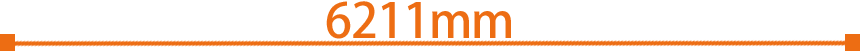
<style>
.page{position:relative;width:860px;height:51px;background:#ffffff}
.page>*{position:absolute;margin:0}
.t1{font:48px "AdobeHeitiStd-Regular";letter-spacing:-0.02em;color:#ed6d13}
</style>
<div class="page">
<p class="t1" style="left:326px;top:1px;width:185px;height:38px">6211mm</p>
</div>
